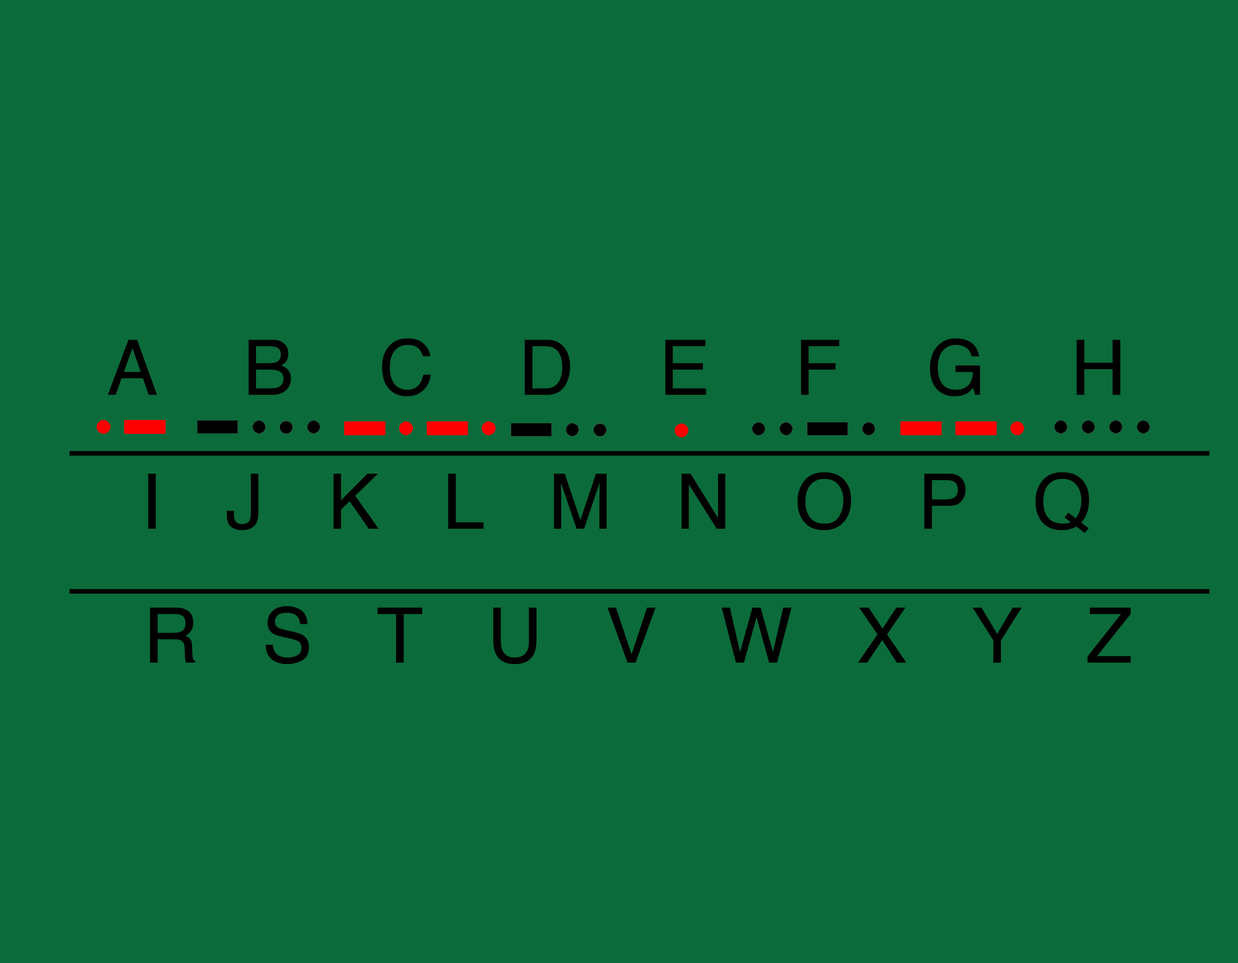
<style>
.page{position:relative;width:1238px;height:963px;background:#0b6b3a}
.page>*{position:absolute;margin:0}
.t1{font:76.4px/133.8px "Helvetica";color:#000000}
</style>
<div class="page">
<p class="t1" style="left:108px;top:338px;width:1023px;height:326px;text-align:center">A    B    C    D    E    F    G    H  <br>I   J   K   L   M   N   O   P   Q  <br>R   S   T   U   V   W   X   Y   Z</p>
</div>
